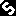
<style>
.page{position:relative;width:16px;height:16px;background:#000000}
.page>*{position:absolute;margin:0}
.t1{font:16.3px "SuperstarM54";color:#ffffff}
</style>
<div class="page">
<p class="t1" style="left:2px;top:2px;width:13px;height:13px;rotate:-45deg">S</p>
</div>
